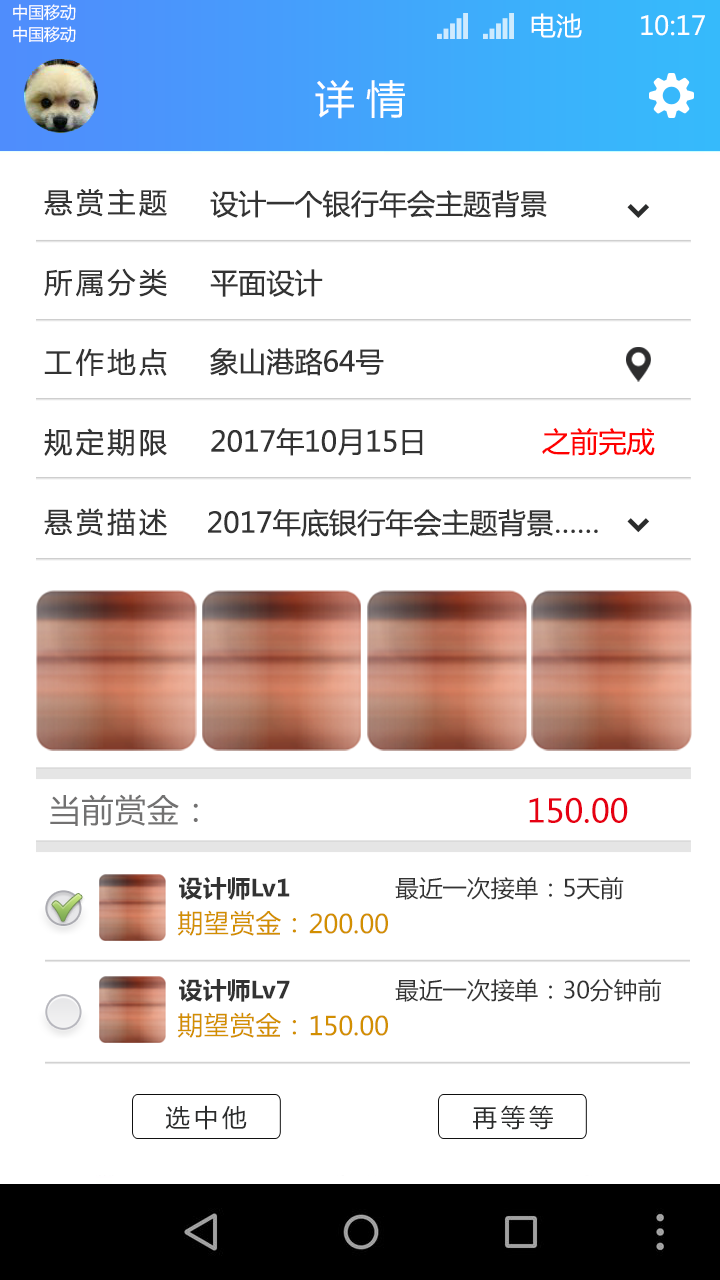
<style>
.page{position:relative;width:720px;height:1280px;background:#ffffff}
.page>*{position:absolute;margin:0}
.t1{font:16.2px "MicrosoftYaHei";color:#ffffff;text-transform:uppercase}
.t2{font:26.1px "MicrosoftYaHei";color:#ffffff;text-transform:uppercase}
.t3{font:39.5px "MicrosoftYaHei";color:#ffffff;text-transform:uppercase}
.t4{font:28.1px/79.9px "MicrosoftYaHei";color:#333333}
.t5{font:28.1px "MicrosoftYaHei";color:#333333}
.t6{font:28.1px "MicrosoftYaHei";color:#ff0000}
.t7{font:31.9px "MicrosoftYaHei";color:#727171}
.t8{font:31.9px "MicrosoftYaHei";color:#e60012}
.t9{font:23.6px "MicrosoftYaHei-Bold";color:#333333}
.t10{font:23.6px "MicrosoftYaHei";color:#333333}
.t11{font:25.8px "MicrosoftYaHei";color:#d28f00}
.t12{font:24.5px "MicrosoftYaHei";letter-spacing:0.15em;color:#2b2c2c}
</style>
<div class="page">
<p class="t1" style="left:13px;top:4px;width:63px;height:17px">中国移动</p>
<p class="t2" style="left:531px;top:13px;width:51px;height:25px">电池</p>
<p class="t2" style="left:641px;top:15px;width:64px;height:21px">10:17</p>
<p class="t1" style="left:13px;top:26px;width:63px;height:17px">中国移动</p>
<p class="t3" style="left:315px;top:80px;width:90px;height:39px">详 情</p>
<p class="t4" style="left:44px;top:188px;width:123px;height:348px;text-align:justify">悬赏主题<br>所属分类<br>工作地点<br>规定期限<br>悬赏描述</p>
<p class="t5" style="left:210px;top:190px;width:337px;height:28px">设计一个银行年会主题背景</p>
<p class="t5" style="left:210px;top:269px;width:113px;height:28px">平面设计</p>
<p class="t5" style="left:210px;top:348px;width:174px;height:28px">象山港路64号</p>
<p class="t5" style="left:211px;top:428px;width:212px;height:28px">2017年10月15日</p>
<p class="t6" style="left:542px;top:428px;width:113px;height:28px">之前完成</p>
<p class="t5" style="left:208px;top:509px;width:390px;height:28px">2017年底银行年会主题背景……</p>
<p class="t7" style="left:50px;top:794px;width:148px;height:32px">当前赏金：</p>
<p class="t8" style="left:529px;top:797px;width:99px;height:26px">150.00</p>
<p class="t9" style="left:179px;top:877px;width:111px;height:23px">设计师Lv1</p>
<p class="t10" style="left:395px;top:876px;width:229px;height:24px">最近一次接单：5天前</p>
<p class="t11" style="left:177px;top:910px;width:119px;height:26px">期望赏金：</p>
<p class="t11" style="left:309px;top:913px;width:79px;height:21px">200.00</p>
<p class="t9" style="left:179px;top:979px;width:111px;height:23px">设计师Lv7</p>
<p class="t10" style="left:395px;top:978px;width:266px;height:24px">最近一次接单：30分钟前</p>
<p class="t11" style="left:177px;top:1012px;width:119px;height:26px">期望赏金：</p>
<p class="t11" style="left:310px;top:1015px;width:78px;height:21px">150.00</p>
<p class="t12" style="left:165px;top:1105px;width:82px;height:25px">选中他</p>
<p class="t12" style="left:473px;top:1105px;width:80px;height:25px">再等等</p>
</div>
